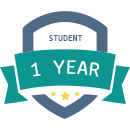
<style>
.page{position:relative;width:130px;height:130px;background:#ffffff}
.page>*{position:absolute;margin:0}
.t1{font:9.2px "UbuntuMono-Regular";letter-spacing:0.025em;color:#506a85}
.t2{font:21.1px "UbuntuMono-Regular";letter-spacing:0.025em;color:#ffffff}
</style>
<div class="page">
<p class="t1" style="left:49px;top:35px;width:33px;height:6px">STUDENT</p>
<p class="t2" style="left:31px;top:60px;width:69px;height:17px">1 YEAR</p>
</div>
